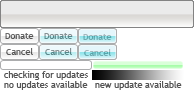
<style>
.page{position:relative;width:194px;height:100px;background:#ffffff}
.page>*{position:absolute;margin:0}
.t1{font:9px "TrebuchetMS";color:#545454}
.t2{font:9px "TrebuchetMS"}
</style>
<div class="page">
<p class="t1" style="left:5px;top:33px;width:29px;height:6px">Donate</p>
<p class="t2" style="left:44px;top:33px;width:29px;height:6px">Donate</p>
<p class="t2" style="left:83px;top:34px;width:29px;height:6px">Donate</p>
<p class="t1" style="left:6px;top:48px;width:27px;height:7px">Cancel</p>
<p class="t2" style="left:45px;top:48px;width:27px;height:7px">Cancel</p>
<p class="t2" style="left:84px;top:49px;width:27px;height:7px">Cancel</p>
<p class="t1" style="left:4px;top:71px;width:84px;height:9px">checking for updates</p>
<p class="t1" style="left:4px;top:81px;width:84px;height:9px">no updates available</p>
<p class="t1" style="left:95px;top:81px;width:87px;height:9px">new update available</p>
</div>
